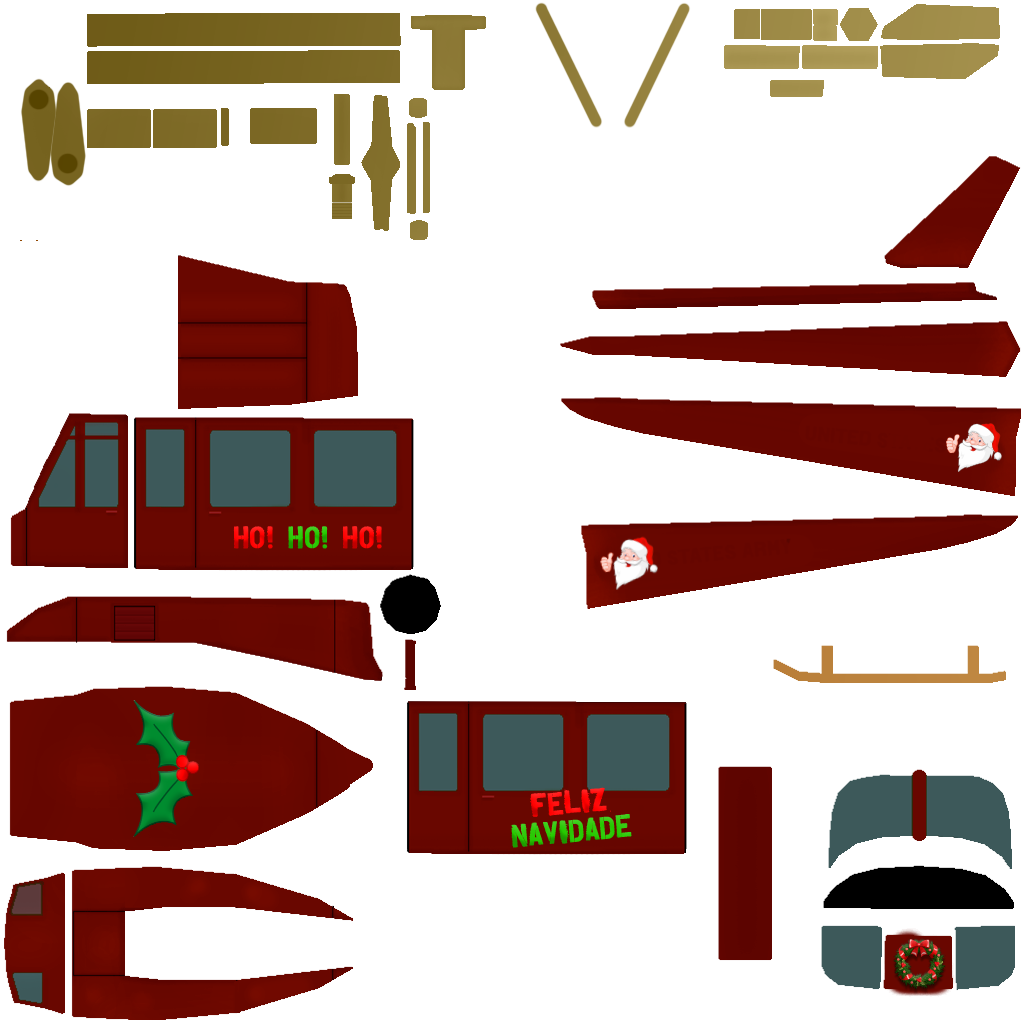
<style>
.page{position:relative;width:1024px;height:1024px;background:#ffffff}
.page>*{position:absolute;margin:0}
.t1{font:24px "Overspray";color:#ff0000;font-weight:bold}
.t2{font:24px "Overspray";color:#26c800;font-weight:bold}
</style>
<div class="page">
<p class="t1" style="left:233px;top:526px;width:149px;height:23px">HO! <span class="t2">HO! </span>HO!</p>
<p class="t2" style="left:511px;top:787px;width:121px;height:61px;rotate:-5deg"><span class="t1">FELIZ </span>NAVIDADE</p>
</div>
